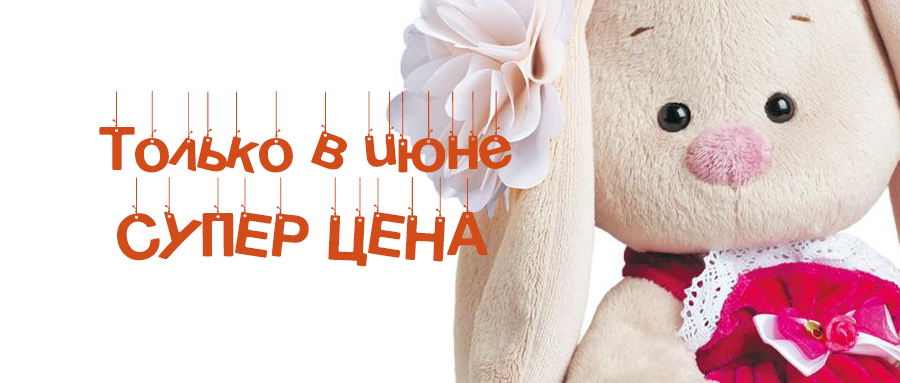
<style>
.page{position:relative;width:900px;height:383px;background:#ffffff}
.page>*{position:absolute;margin:0}
.t1{font:72px "mr_HangingLettersG";color:#d14c18}
</style>
<div class="page">
<p class="t1" style="left:99px;top:91px;width:413px;height:176px">Только в июне<br> СУПЕР ЦЕНА</p>
</div>
